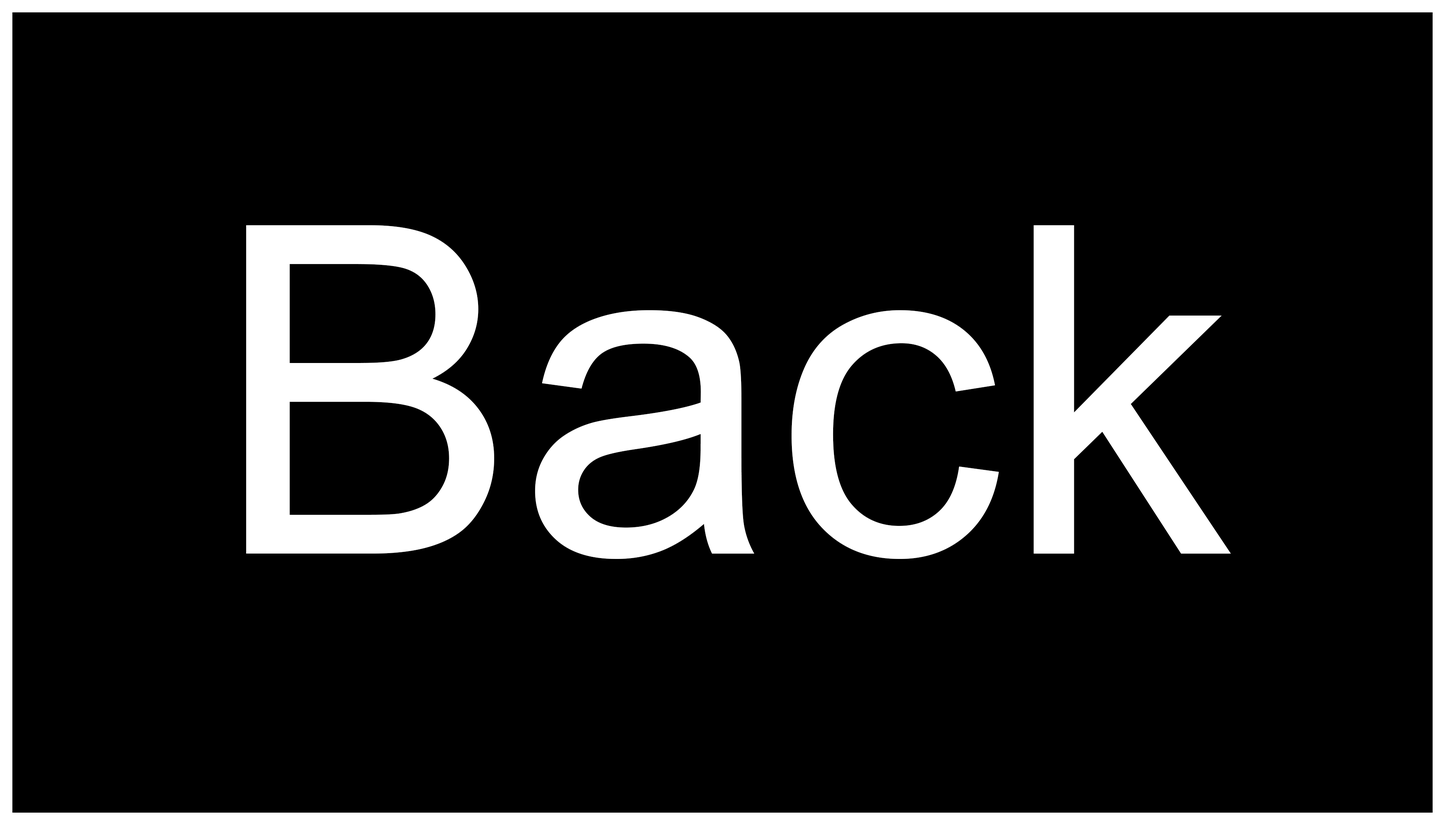
<style>
.page{position:relative;width:1445px;height:825px;background:#000000}
.page>*{position:absolute;margin:0}
.t1{font:458.6px "ArialMT";color:#ffffff}
</style>
<div class="page">
<p class="t1" style="left:246px;top:225px;width:985px;height:334px">Back</p>
</div>
